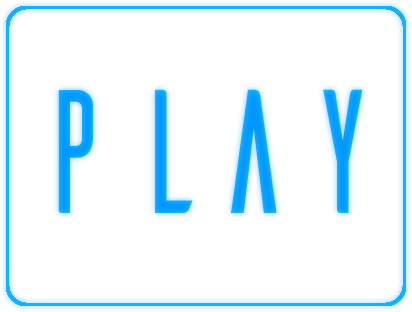
<style>
.page{position:relative;width:412px;height:312px;background:#ffffff}
.page>*{position:absolute;margin:0}
.t1{font:176px "Ailerons-Regular";color:#0098ff;scale:0.91 1}
</style>
<div class="page">
<p class="t1" style="left:58px;top:89px;width:305px;height:124px">play</p>
</div>
